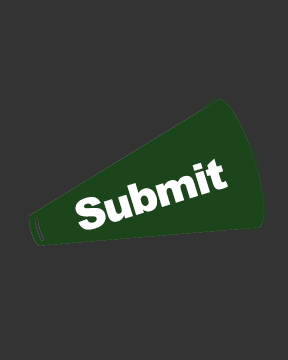
<style>
.page{position:relative;width:288px;height:360px;background:#333333}
.page>*{position:absolute;margin:0}
.t1{font:43px "Arial-Black";letter-spacing:-0.04em;color:#ffffff}
</style>
<div class="page">
<p class="t1" style="left:75px;top:158px;width:153px;height:72px;rotate:-17deg">Submit</p>
</div>
